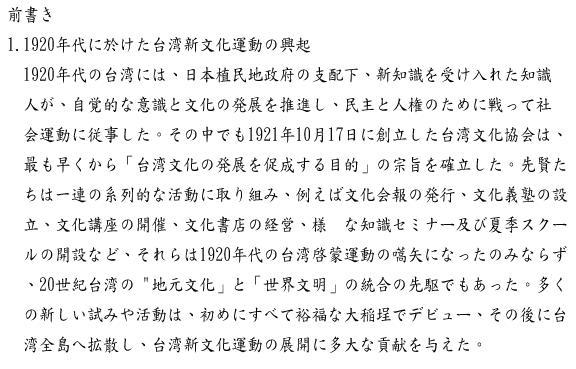
<style>
.page{position:relative;width:576px;height:369px;background:#ffffff}
.page>*{position:absolute;margin:0}
.t1{font:18px/30px "DFKaiShu-SB-Estd-BF";color:#060606;scale:0.89 1}
</style>
<div class="page">
<p class="t1" style="left:8px;top:6px;width:560px;height:347px">前書き<br>1.1920年代に於けた台湾新文化運動の興起<br>　1920年代の台湾には、日本植民地政府の支配下、新知識を受け入れた知識<br>  人が、自覚的な意識と文化の発展を推進し、民主と人権のために戦って社<br>  会運動に従事した。その中でも1921年10月17日に創立した台湾文化協会は、<br>  最も早くから「台湾文化の発展を促成する目的」の宗旨を確立した。先賢た<br>  ちは一連の系列的な活動に取り組み、例えば文化会報の発行、文化義塾の設<br>  立、文化講座の開催、文化書店の経営、様々な知識セミナー及び夏季スクー<br>  ルの開設など、それらは1920年代の台湾啓蒙運動の嚆矢になったのみならず<br>  、20世紀台湾の "地元文化」と「世界文明」の統合の先駆でもあった。多く<br>  の新しい試みや活動は、初めにすべて裕福な大稲埕でデビュー、その後に台<br>  湾全島へ拡散し、台湾新文化運動の展開に多大な貢献を与えた。</p>
</div>
